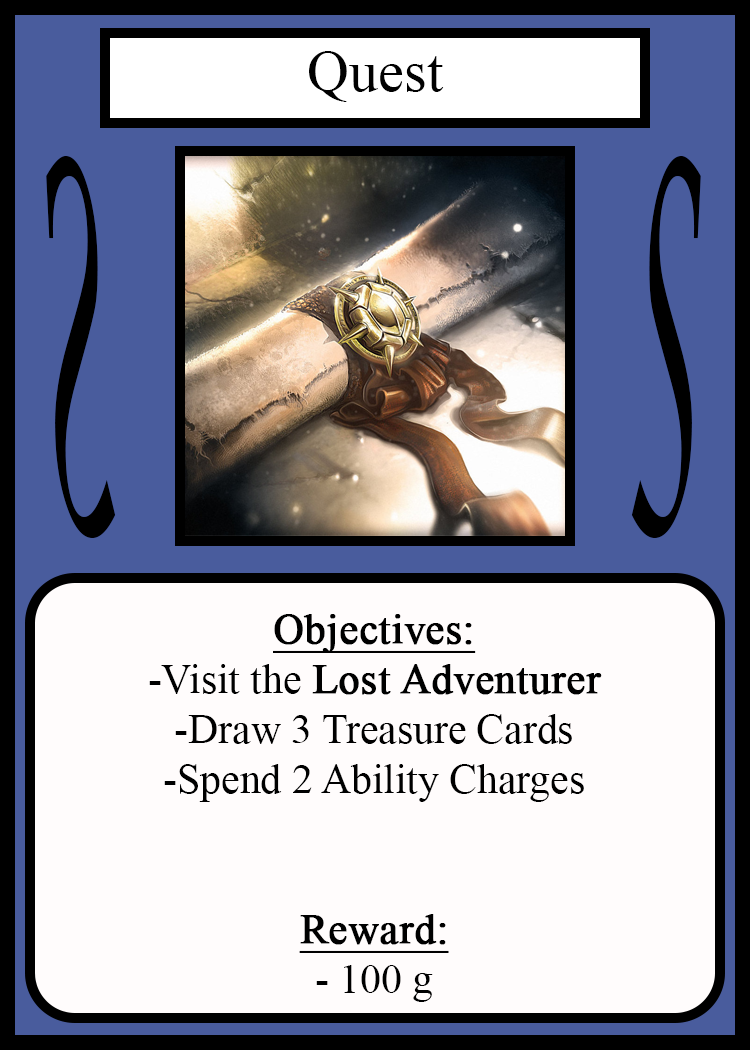
<style>
.page{position:relative;width:750px;height:1050px;background:#fffcfc}
.page>*{position:absolute;margin:0}
.t1{font:58.3px "TimesNewRomanPSMT";color:#010101}
.t2{font:504.3px "LucidaCalligraphy-Italic";color:#000000;scale:0.24 1}
.t3{font:504.1px "LucidaCalligraphy-Italic";color:#000000;scale:0.24 1}
.t4{font:41.7px "TimesNewRomanPSMT";color:#000000}
.t5{font:41.7px "TimesNewRomanPSMT";color:#000000;font-weight:bold;text-decoration:underline}
.t6{font:41.7px "TimesNewRomanPSMT";color:#000000;font-weight:bold}
</style>
<div class="page">
<p class="t1" style="left:309px;top:51px;width:135px;height:51px">Quest</p>
<p class="t2" style="left:46px;top:156px;width:70px;height:382px;rotate:180deg">S</p>
<p class="t3" style="left:631px;top:156px;width:70px;height:382px">S</p>
<p class="t4" style="left:149px;top:614px;width:453px;height:388px;text-align:center"><span class="t5">Objectives:<br></span>-Visit the <span class="t6">Lost Adventurer<br></span>-Draw 3 Treasure Cards<br>-Spend 2 Ability Charges<br><br><br><span class="t5">Reward:</span><br>- 100 g</p>
</div>
